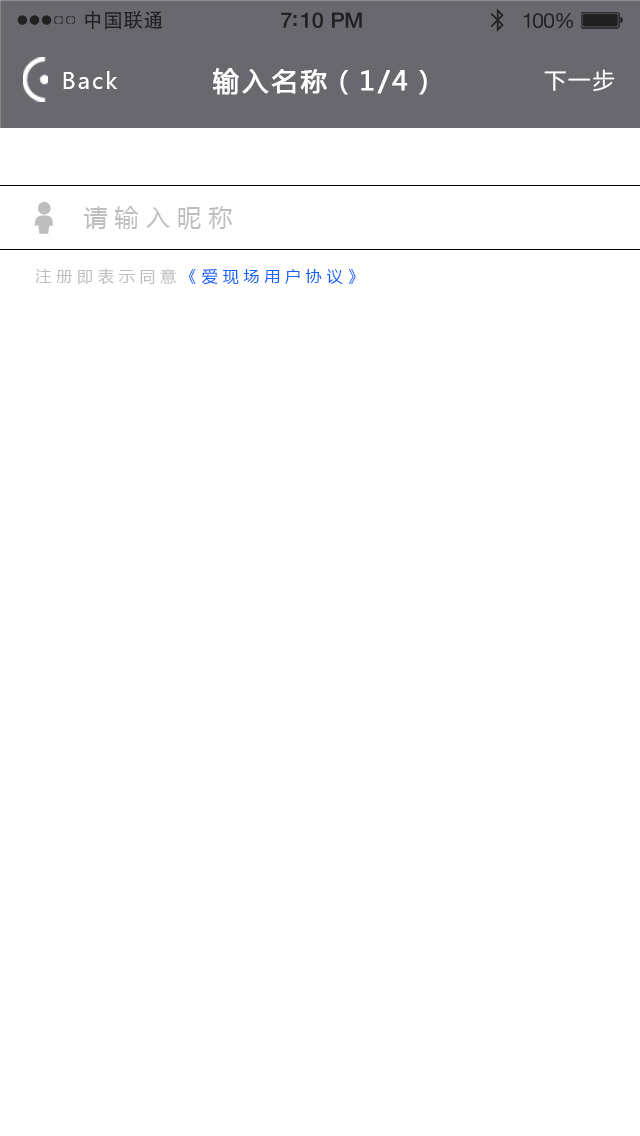
<style>
.page{position:relative;width:640px;height:1136px;background:#ffffff}
.page>*{position:absolute;margin:0}
.t1{font:19.7px "AdobeHeitiStd-Regular";letter-spacing:0.02em;color:#212121}
.t2{font:21.4px "HelveticaNeue-Medium";letter-spacing:-0.02em;color:#212121}
.t3{font:20.6px "HelveticaNeue";letter-spacing:-0.02em;color:#212121}
.t4{font:22px "MicrosoftYaHei";letter-spacing:0.1em;color:#ffffff}
.t5{font:26px "MicrosoftYaHei";letter-spacing:0.1em;color:#ffffff;font-weight:bold}
.t6{font:24px "MicrosoftYaHei";letter-spacing:0.3em;color:#bebebe}
.t7{font:16px "MicrosoftYaHei";letter-spacing:0.3em;color:#0b64f7}
.t8{font:16px "MicrosoftYaHei";letter-spacing:0.3em;color:#bebebe}
</style>
<div class="page">
<p class="t1" style="left:85px;top:10px;width:78px;height:20px">中国联通</p>
<p class="t2" style="left:281px;top:12px;width:81px;height:16px">7:10 PM</p>
<p class="t3" style="left:523px;top:13px;width:50px;height:16px">100%</p>
<p class="t4" style="left:63px;top:71px;width:55px;height:18px">Back</p>
<p class="t5" style="left:212px;top:68px;width:215px;height:27px">输入名称（1/4）</p>
<p class="t4" style="left:544px;top:69px;width:71px;height:23px">下一步</p>
<p class="t6" style="left:84px;top:206px;width:148px;height:24px">请输入昵称</p>
<p class="t7" style="left:35px;top:268px;width:321px;height:17px"><span class="t8">注册即表示同意</span>《爱现场用户协议》</p>
</div>
